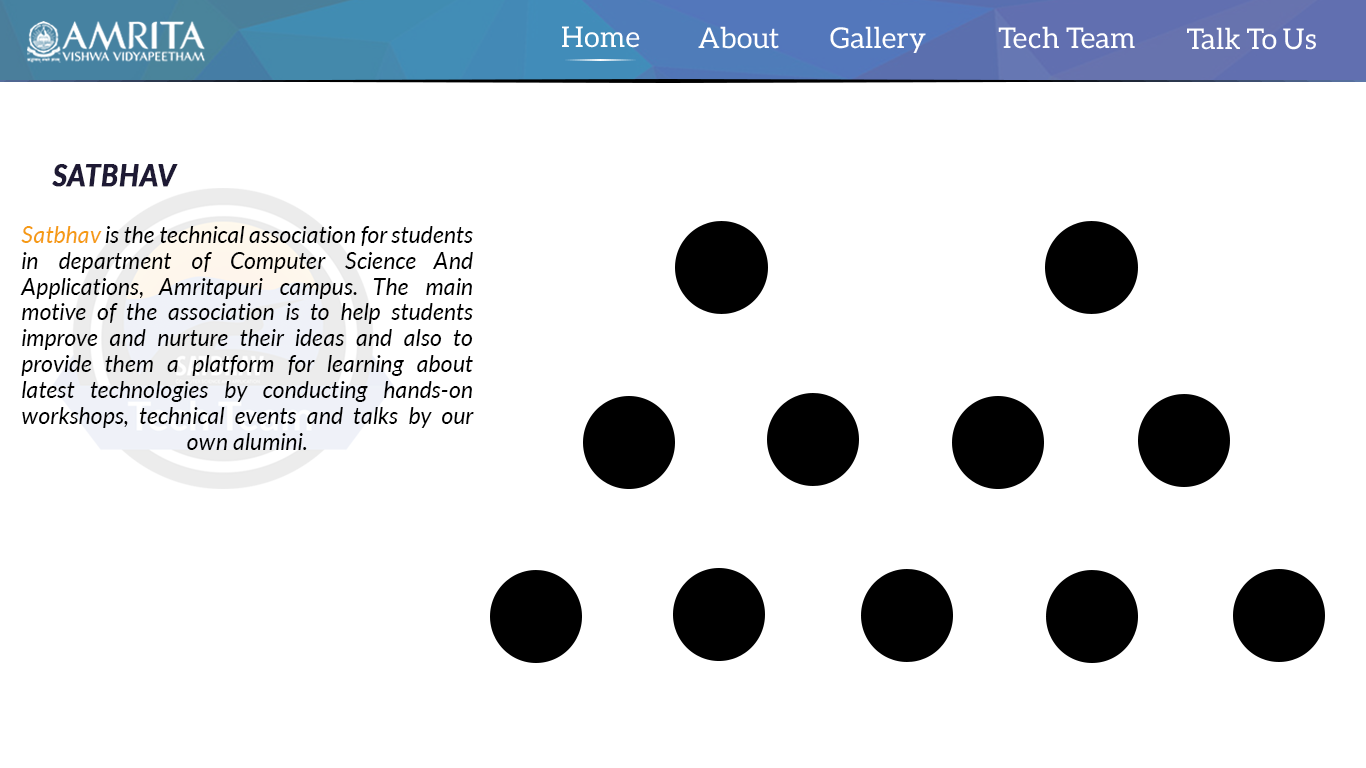
<style>
.page{position:relative;width:1366px;height:768px;background:#ffffff}
.page>*{position:absolute;margin:0}
.t1{font:28.7px "Aleo-Regular";color:#ffffff}
.t2{font:30.6px "Lato-BoldItalic";color:#1e1a34;font-weight:bold;scale:0.92 1}
.t3{font:24px/25.9px "Lato-Italic";color:#000000;scale:0.97 1}
.t4{font:24px/25.9px "Lato-Italic";color:#f59b14;scale:0.97 1}
</style>
<div class="page">
<p class="t1" style="left:562px;top:26px;width:78px;height:22px">Home</p>
<p class="t1" style="left:698px;top:26px;width:81px;height:23px">About</p>
<p class="t1" style="left:830px;top:26px;width:96px;height:27px">Gallery</p>
<p class="t1" style="left:998px;top:26px;width:137px;height:23px">Tech Team</p>
<p class="t1" style="left:1187px;top:27px;width:129px;height:23px">Talk To Us</p>
<p class="t2" style="left:52px;top:164px;width:126px;height:23px">SATBHAV</p>
<p class="t3" style="left:20px;top:226px;width:454px;height:224px;text-align:justify"><span class="t4">Satbhav</span> is the technical association for students in department of Computer Science And Applications, Amritapuri campus. The main motive of the association is to help students improve and nurture their ideas and also to provide them a platform for learning about latest technologies by conducting hands-on workshops, technical events and talks by our own alumini.</p>
</div>
